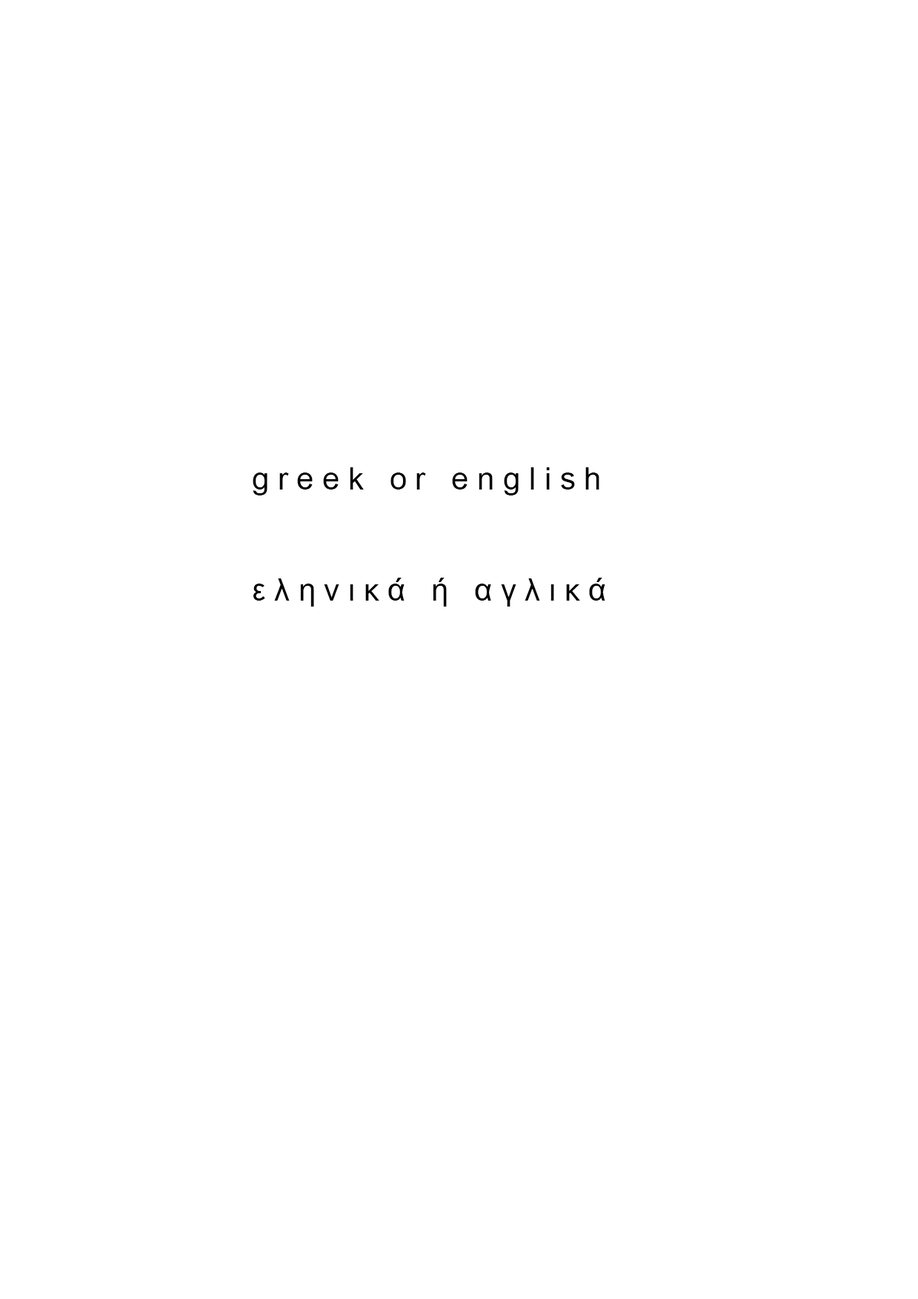
<style>
.page{position:relative;width:918px;height:1299px;background:#ffffff}
.page>*{position:absolute;margin:0}
.t1{font:30.9px "ArialMT";letter-spacing:0.28em;color:#000000}
</style>
<div class="page">
<p class="t1" style="left:253px;top:467px;width:352px;height:140px">greek or english<br><br><br>εληνικά ή αγλικά</p>
</div>
